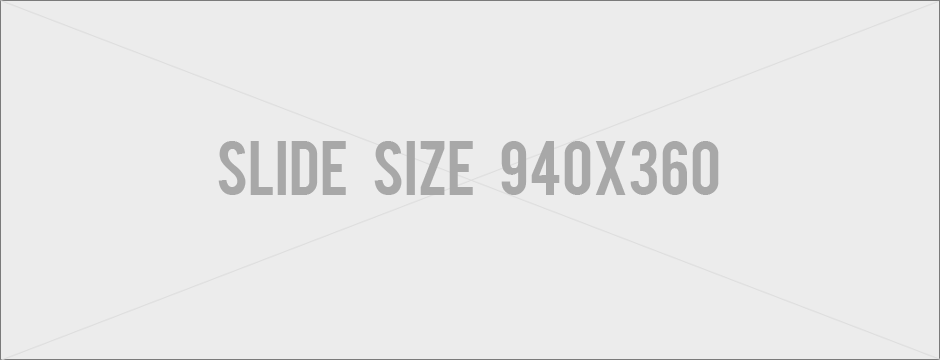
<style>
.page{position:relative;width:940px;height:360px;background:#ececec}
.page>*{position:absolute;margin:0}
.t1{font:60px "Bebas";color:#a8a8a8}
</style>
<div class="page">
<p class="t1" style="left:218px;top:141px;width:501px;height:54px">slide    size    940x360</p>
</div>
